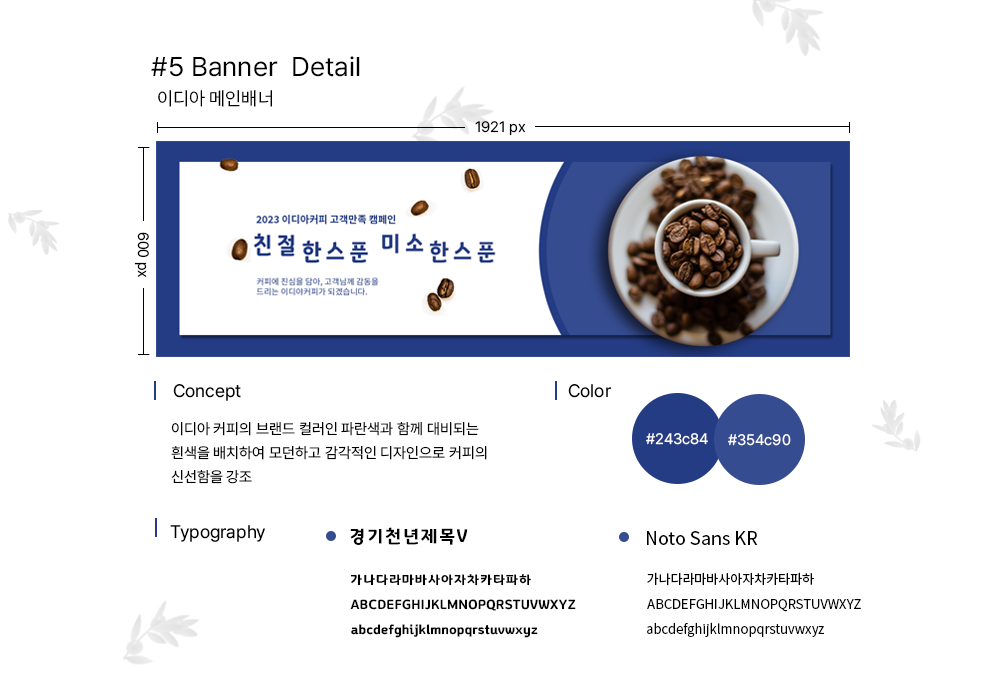
<style>
.page{position:relative;width:1000px;height:700px;background:#ffffff}
.page>*{position:absolute;margin:0}
.t1{font:27px "Pretendard-Regular";color:#000000}
.t2{font:18.7px "Pretendard-Regular";color:#000000}
.t3{font:15px "Pretendard-Regular";color:#000000}
.t4{font:18px "Pretendard-Regular";color:#000000}
.t5{font:15px/24px "Pretendard-Regular";color:#000000}
.t6{font:15px "Pretendard-Regular";color:#ffffff}
.t7{font:18px "GyeonggiTitleV";color:#000000}
.t8{font:18px "NotoSansKR-Regular";color:#000000}
.t9{font:13px "GyeonggiTitleV";color:#000000}
.t10{font:13px "NotoSansKR-Regular";color:#000000}
</style>
<div class="page">
<p class="t1" style="left:151px;top:56px;width:209px;height:21px">#5 Banner  Detail</p>
<p class="t2" style="left:158px;top:90px;width:114px;height:17px">이디아 메인배너</p>
<p class="t3" style="left:475px;top:121px;width:51px;height:15px">1921 px</p>
<p class="t3" style="left:134px;top:232px;width:15px;height:45px;rotate:90deg">600 px</p>
<p class="t4" style="left:173px;top:384px;width:68px;height:17px">Concept</p>
<p class="t4" style="left:568px;top:384px;width:44px;height:14px">Color</p>
<p class="t5" style="left:171px;top:421px;width:316px;height:63px">이디아 커피의 브랜드 컬러인 파란색과 함께 대비되는<br>흰색을 배치하여 모던하고 감각적인 디자인으로 커피의<br>신선함을 강조</p>
<p class="t6" style="left:646px;top:433px;width:62px;height:12px">#243c84</p>
<p class="t6" style="left:728px;top:434px;width:63px;height:12px">#354c90</p>
<p class="t4" style="left:170px;top:525px;width:96px;height:17px">Typography</p>
<p class="t7" style="left:350px;top:527px;width:118px;height:18px">경기천년제목V</p>
<p class="t8" style="left:647px;top:531px;width:111px;height:14px">Noto Sans KR</p>
<p class="t9" style="left:350px;top:574px;width:181px;height:12px">가나다라마바사아자차카타파하</p>
<p class="t10" style="left:647px;top:572px;width:167px;height:14px">가나다라마바사아자차카타파하</p>
<p class="t9" style="left:350px;top:599px;width:226px;height:12px">ABCDEFGHIJKLMNOPQRSTUVWXYZ</p>
<p class="t10" style="left:647px;top:599px;width:214px;height:13px">ABCDEFGHIJKLMNOPQRSTUVWXYZ</p>
<p class="t9" style="left:351px;top:624px;width:187px;height:14px">abcdefghijklmnopqrstuvwxyz</p>
<p class="t10" style="left:647px;top:622px;width:177px;height:15px">abcdefghijklmnopqrstuvwxyz</p>
</div>
